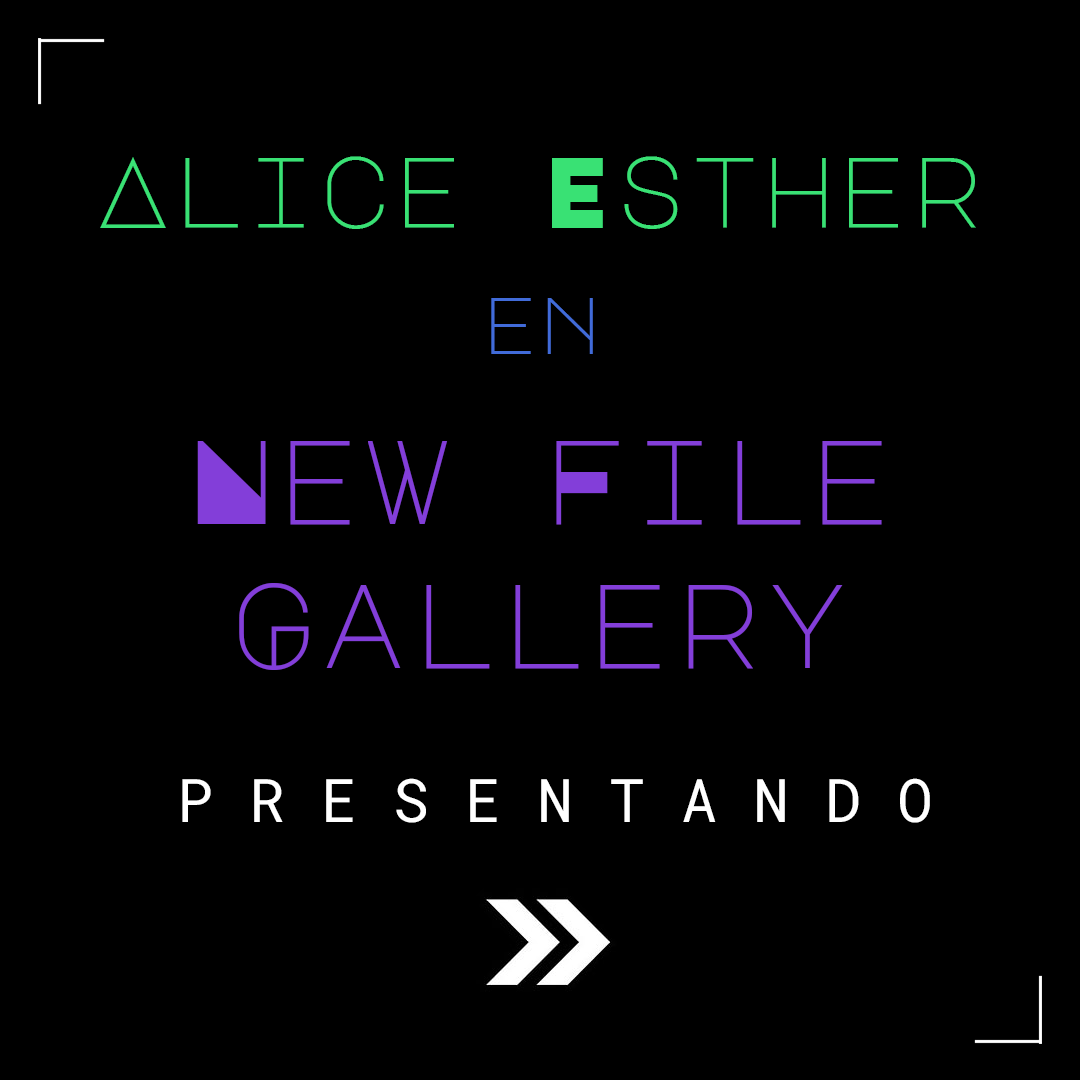
<style>
.page{position:relative;width:1080px;height:1080px;background:#000000}
.page>*{position:absolute;margin:0}
.t1{font:100px "MajorMonoDisplay-Regular";color:#39e174}
.t2{font:80px "MajorMonoDisplay-Regular";color:#416bd9}
.t3{font:120px "MajorMonoDisplay-Regular";color:#833ed9}
.t4{font:60px "RobotoMono-Regular";color:#ffffff}
</style>
<div class="page">
<p class="t1" style="left:100px;top:156px;width:876px;height:73px">Alice Esther</p>
<p class="t2" style="left:491px;top:298px;width:102px;height:56px">en</p>
<p class="t3" style="left:197px;top:441px;width:685px;height:229px;text-align:center">New File Gallery</p>
<p class="t4" style="left:182px;top:778px;width:748px;height:45px">P R E S E N T A N D O</p>
</div>
